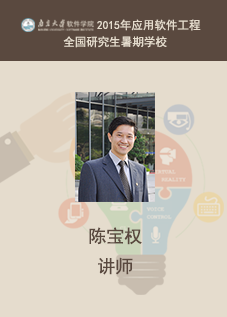
<style>
.page{position:relative;width:227px;height:317px;background:#e5dccd}
.page>*{position:absolute;margin:0}
.t1{font:11.5px/1px "SimHei";color:#e5dccd}
.t2{font:9.6px "SimHei";color:#0e3942}
.t3{font:18px/30px "SimHei";color:#5a493f}
</style>
<div class="page">
<p class="t1" style="left:63px;top:19px;width:138px;height:29px;text-align:center"><span class="t2">              </span>2015年应用软件工程<br>全国研究生暑期学校</p>
<p class="t3" style="left:89px;top:227px;width:53px;height:48px;text-align:center">陈宝权<br>讲师</p>
</div>
